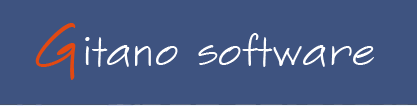
<style>
.page{position:relative;width:417px;height:106px;background:#3e5380}
.page>*{position:absolute;margin:0}
.t1{font:40px "SketchFlowPrint";color:#ffffff}
.t2{font:64px "SketchFlowPrint";color:#e24912}
</style>
<div class="page">
<p class="t1" style="left:35px;top:23px;width:339px;height:57px"><span class="t2">G</span>itano software</p>
</div>
